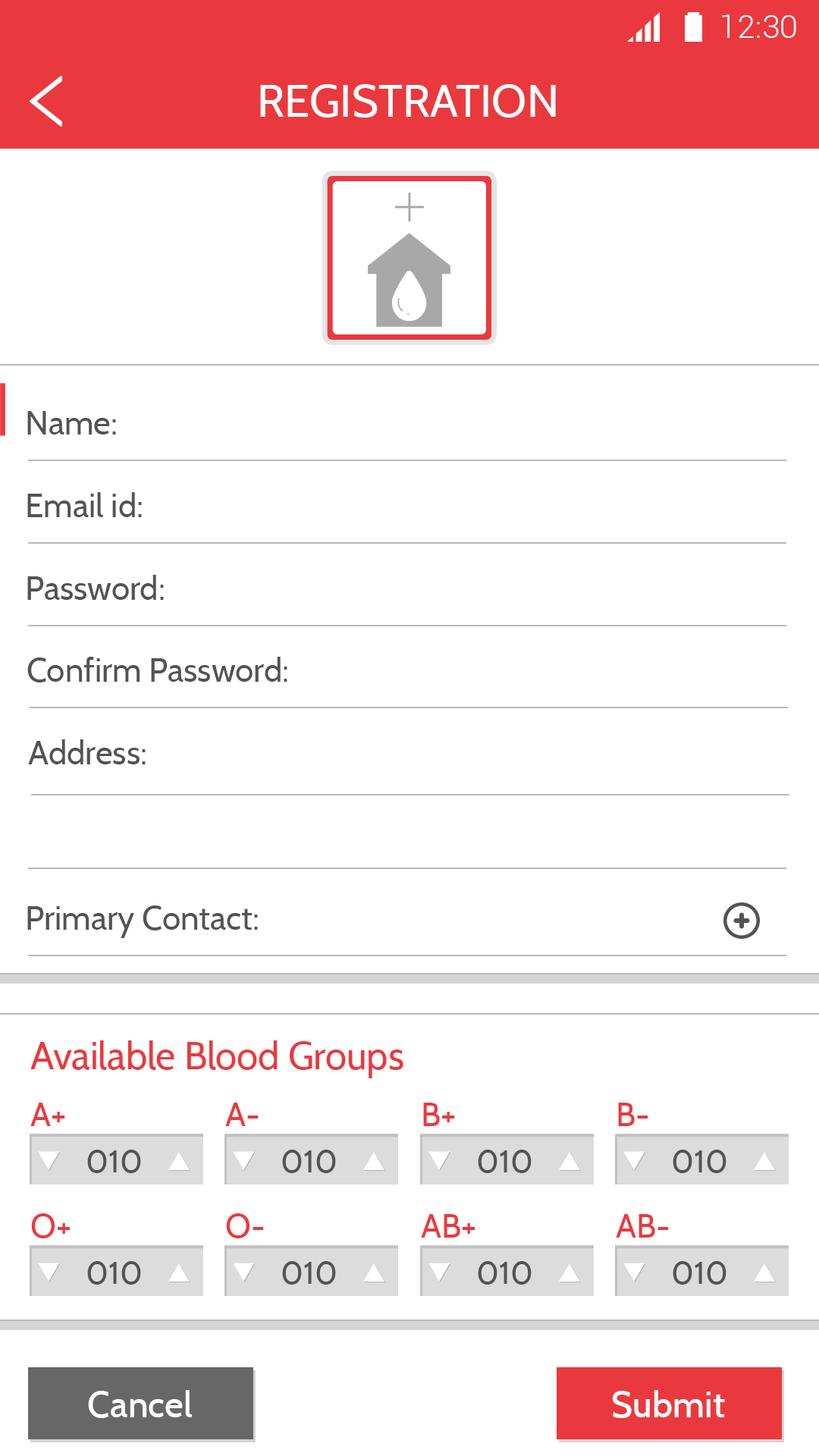
<style>
.page{position:relative;width:819px;height:1456px;background:#ffffff}
.page>*{position:absolute;margin:0}
.t1{font:32.3px "Roboto-Light";color:#ffffff}
.t2{font:45.5px "Cabin-Regular";color:#ffffff}
.t3{font:33.3px "Cabin-Regular";color:#535353}
.t4{font:38.4px "Cabin-Regular";color:#ea393e}
.t5{font:33.4px "Cabin-Regular";color:#ea393e}
.t6{font:33.3px "Cabin-Regular";color:#ea393e}
.t7{font:31.8px "Cabin-Regular";color:#535353}
.t8{font:36.4px "Cabin-Medium";color:#ffffff}
</style>
<div class="page">
<p class="t1" style="left:722px;top:14px;width:74px;height:24px">12:30</p>
<p class="t2" style="left:260px;top:84px;width:296px;height:34px">REGISTRATION</p>
<p class="t3" style="left:27px;top:411px;width:89px;height:24px">Name:</p>
<p class="t3" style="left:27px;top:492px;width:115px;height:25px">Email id:</p>
<p class="t3" style="left:27px;top:575px;width:137px;height:25px">Password:</p>
<p class="t3" style="left:27px;top:657px;width:260px;height:25px">Confirm Password:</p>
<p class="t3" style="left:28px;top:739px;width:118px;height:25px">Address:</p>
<p class="t3" style="left:27px;top:905px;width:231px;height:33px">Primary Contact:</p>
<p class="t4" style="left:30px;top:1040px;width:373px;height:38px">Available Blood Groups</p>
<p class="t5" style="left:30px;top:1103px;width:35px;height:23px">A+</p>
<p class="t6" style="left:225px;top:1103px;width:34px;height:23px">A-</p>
<p class="t6" style="left:423px;top:1103px;width:32px;height:23px">B+</p>
<p class="t6" style="left:618px;top:1103px;width:30px;height:23px">B-</p>
<p class="t7" style="left:87px;top:1150px;width:54px;height:23px">010</p>
<p class="t7" style="left:282px;top:1150px;width:54px;height:23px">010</p>
<p class="t7" style="left:478px;top:1150px;width:54px;height:23px">010</p>
<p class="t7" style="left:673px;top:1150px;width:53px;height:23px">010</p>
<p class="t6" style="left:31px;top:1213px;width:40px;height:25px">O+</p>
<p class="t6" style="left:226px;top:1213px;width:38px;height:25px">O-</p>
<p class="t6" style="left:421px;top:1214px;width:54px;height:24px">AB+</p>
<p class="t6" style="left:616px;top:1214px;width:53px;height:24px">AB-</p>
<p class="t7" style="left:87px;top:1261px;width:54px;height:24px">010</p>
<p class="t7" style="left:282px;top:1261px;width:54px;height:24px">010</p>
<p class="t7" style="left:478px;top:1261px;width:54px;height:24px">010</p>
<p class="t7" style="left:673px;top:1261px;width:53px;height:24px">010</p>
<p class="t8" style="left:88px;top:1390px;width:105px;height:28px">Cancel</p>
<p class="t8" style="left:612px;top:1390px;width:113px;height:28px">Submit</p>
</div>
